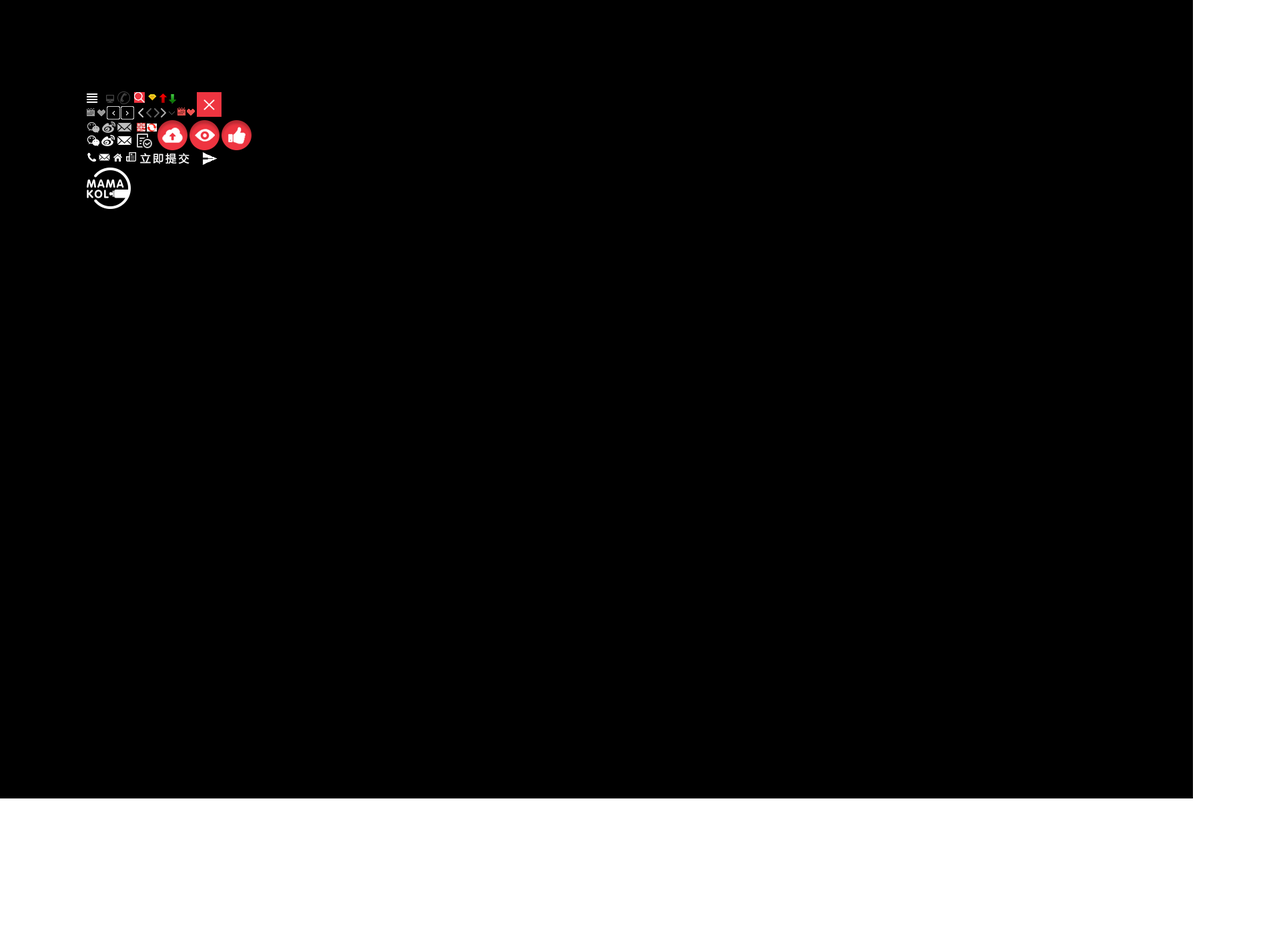
<style>
.page{position:relative;width:1261px;height:946px;background:#000000}
.page>*{position:absolute;margin:0}
.t1{font:10.7px "MicrosoftYaHei";letter-spacing:0.2em;color:#fafafa}
</style>
<div class="page">
<p class="t1" style="left:140px;top:153px;width:50px;height:11px">立即提交</p>
</div>
